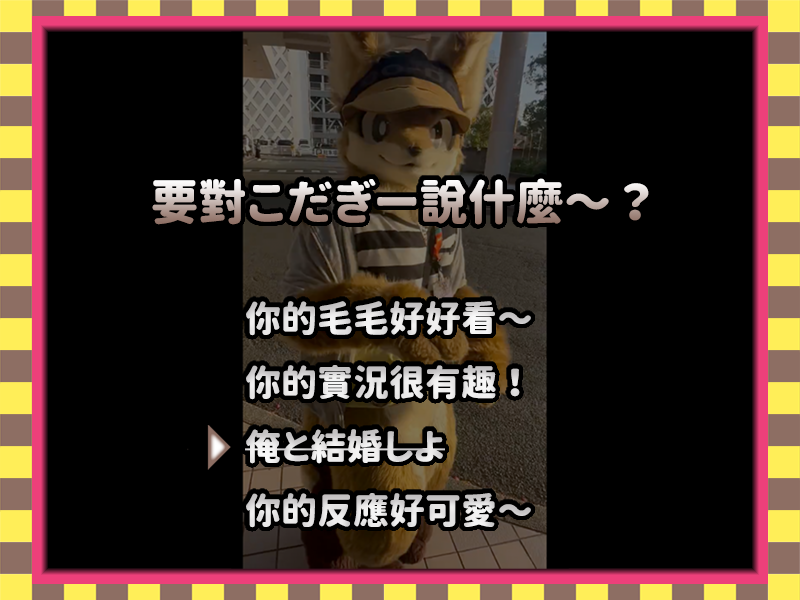
<style>
.page{position:relative;width:800px;height:600px;background:#000000}
.page>*{position:absolute;margin:0}
.t1{font:48px "GenSenRoundedTW-H"}
.t2{font:36px/64px "GenSenRoundedTW-H";color:#e3e2e2}
</style>
<div class="page">
<p class="t1" style="left:152px;top:178px;width:497px;height:47px">要對こだぎー說什麼～？</p>
<p class="t2" style="left:245px;top:301px;width:286px;height:227px">你的毛毛好好看〜<br>你的實況很有趣！<br>俺と結婚しよ<br>你的反應好可愛～</p>
</div>
